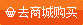
<style>
.page{position:relative;width:83px;height:25px}
.page>*{position:absolute;margin:0}
.t1{font:12px "SimSun";color:#ffffff}
</style>
<div class="page">
<p class="t1" style="left:18px;top:6px;width:59px;height:12px">去商城购买</p>
</div>
